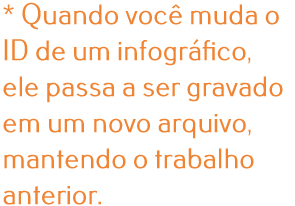
<style>
.page{position:relative;width:295px;height:206px;background:#ffffff}
.page>*{position:absolute;margin:0}
.t1{font:30px "Pfennig";color:#f08435}
</style>
<div class="page">
<p class="t1" style="left:3px;top:2px;width:280px;height:203px">* Quando você muda o<br>ID de um infográfico,<br>ele passa a ser gravado <br>em um novo arquivo,<br>mantendo o trabalho<br>anterior.</p>
</div>
